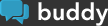
<style>
.page{position:relative;width:108px;height:26px;background:#333333}
.page>*{position:absolute;margin:0}
.t1{font:23.5px "Avenir-Heavy";color:#ffffff}
</style>
<div class="page">
<p class="t1" style="left:38px;top:2px;width:71px;height:24px">buddy</p>
</div>
